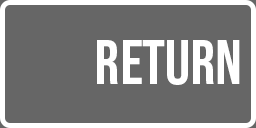
<style>
.page{position:relative;width:256px;height:128px;background:#666666}
.page>*{position:absolute;margin:0}
.t1{font:62.6px "BebasNeuePro-Bold";color:#ffffff}
</style>
<div class="page">
<p class="t1" style="left:97px;top:40px;width:143px;height:45px">RETURN</p>
</div>
